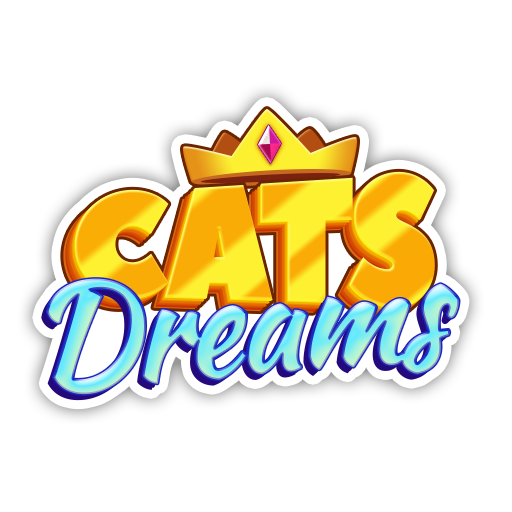
<style>
.page{position:relative;width:512px;height:512px;background:#ffffff}
.page>*{position:absolute;margin:0}
.t1{font:164.3px "PeaceSans";letter-spacing:-0.05em;scale:0.87 1}
.t2{font:136.9px "KaushanScript-Regular";letter-spacing:-0.05em;font-weight:bold}
</style>
<div class="page">
<p class="t1" style="left:75px;top:171px;width:360px;height:137px">CATS</p>
<p class="t2" style="left:47px;top:278px;width:412px;height:117px;rotate:-4deg">Dreams</p>
</div>
